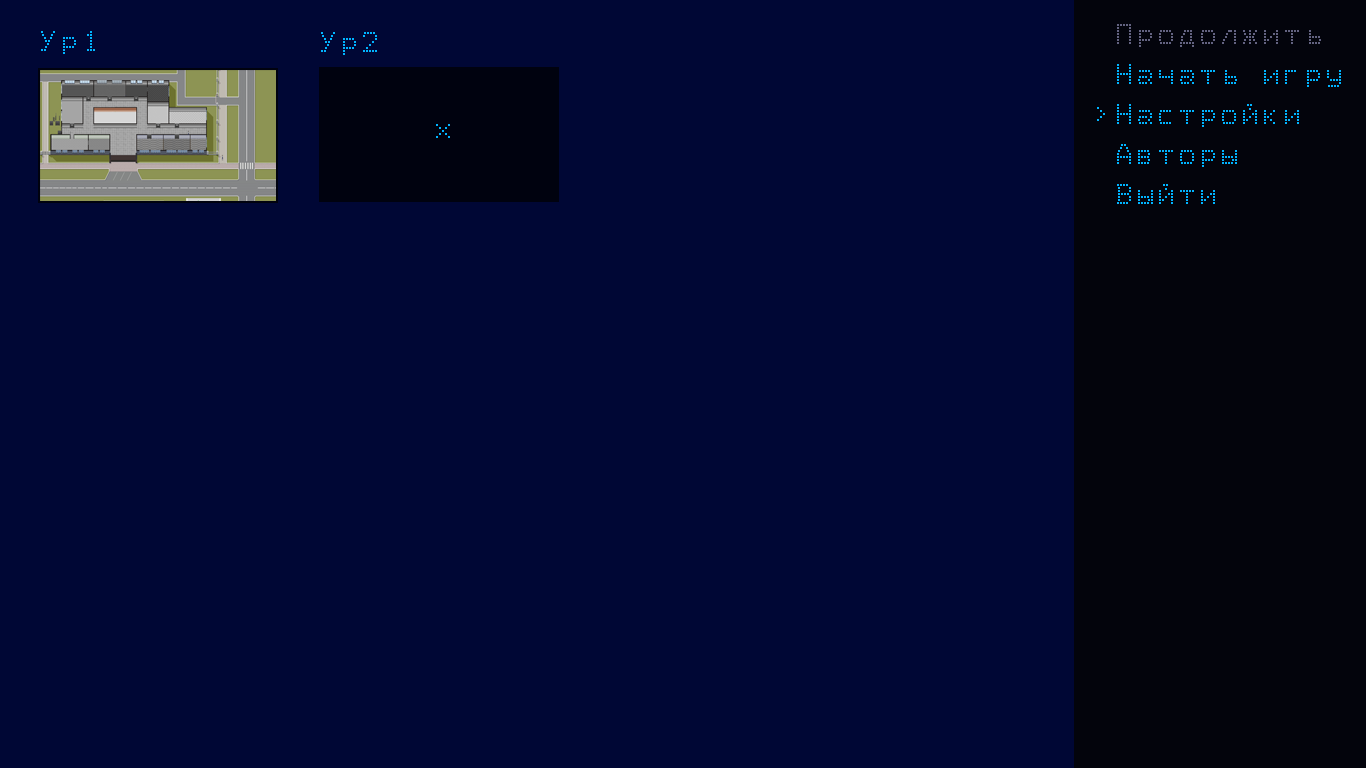
<style>
.page{position:relative;width:1366px;height:768px;background:#000735}
.page>*{position:absolute;margin:0}
.t1{font:33.3px "Epson1";color:#00b4ff}
.t2{font:33.3px "Epson1";color:#636381}
</style>
<div class="page">
<p class="t1" style="left:1117px;top:24px;width:224px;height:180px;text-align:right">Продолжить<br>Начать игру<br>Настройки<br>Авторы<br>Выйти</p>
<p class="t2" style="left:1117px;top:24px;width:204px;height:23px">Продолжить</p>
<p class="t1" style="left:41px;top:31px;width:54px;height:23px">Ур1</p>
<p class="t1" style="left:321px;top:32px;width:56px;height:23px">Ур2</p>
</div>
